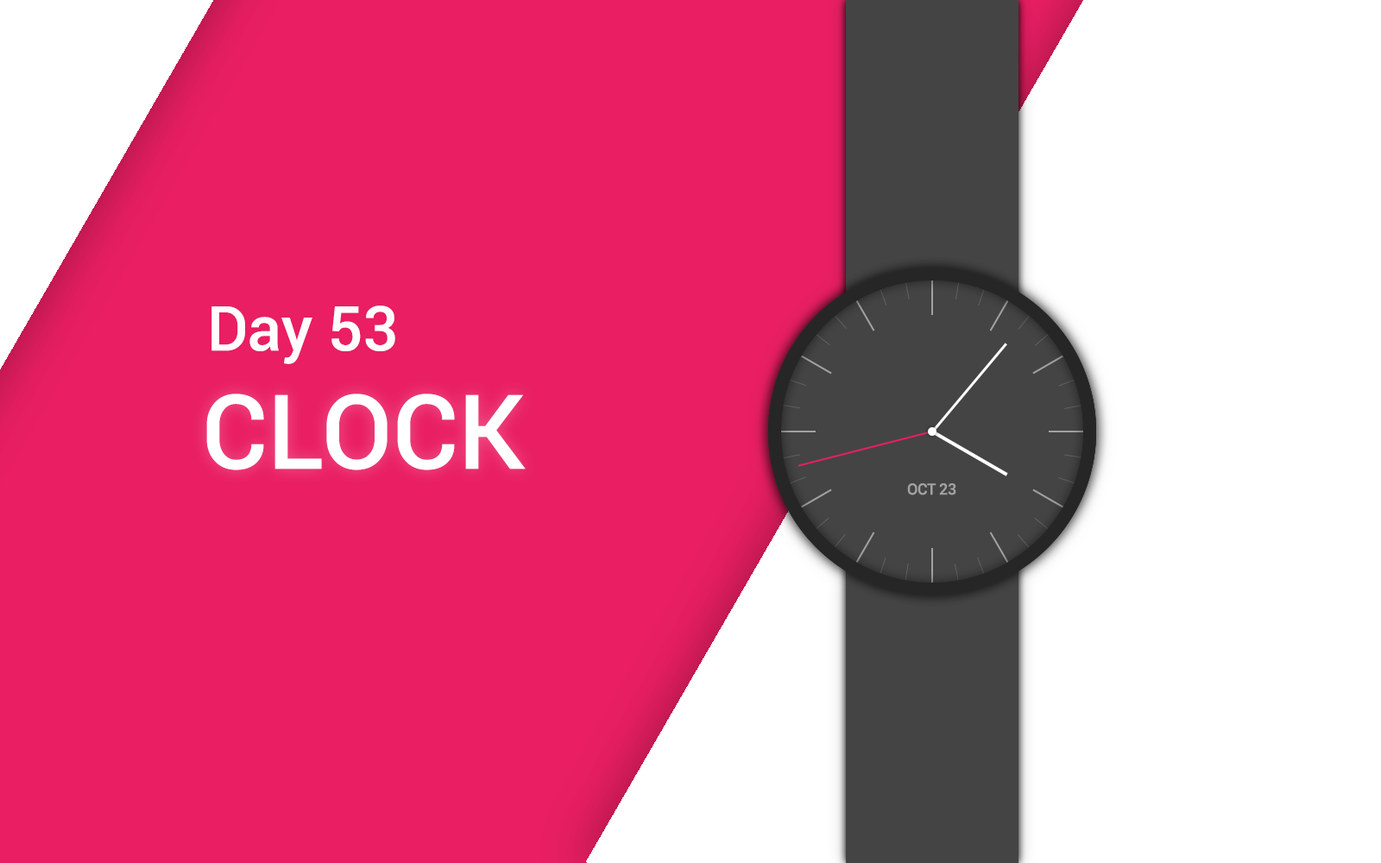
<style>
.page{position:relative;width:1381px;height:863px;background:#e91e63}
.page>*{position:absolute;margin:0}
.t1{font:62.2px "Roboto-Medium";color:#ffffff}
.t2{font:103.6px "Roboto-Medium";color:#ffffff}
</style>
<div class="page">
<p class="t1" style="left:212px;top:306px;width:183px;height:58px">Day 53</p>
<p class="t2" style="left:206px;top:394px;width:320px;height:76px">CLOCK</p>
</div>
